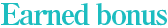
<style>
.page{position:relative;width:168px;height:28px;background:#ffffff}
.page>*{position:absolute;margin:0}
.t1{font:30px "RyuminPro-ExBold";letter-spacing:-0.08em;color:#1cbdc0}
</style>
<div class="page">
<p class="t1" style="left:1px;top:3px;width:166px;height:23px">Earned bonus</p>
</div>
